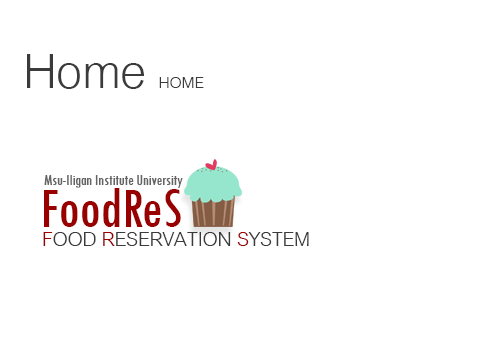
<style>
.page{position:relative;width:504px;height:360px;background:#ffffff}
.page>*{position:absolute;margin:0}
.t1{font:72px "CordiaNew";letter-spacing:-0.01em;color:#3b3b3b}
.t2{font:24px "CordiaNew";letter-spacing:-0.01em;color:#3b3b3b}
.t3{font:16px "TwCenMT-Condensed";letter-spacing:-0.01em;color:#646464}
.t4{font:60px "TwCenMT-Condensed";letter-spacing:-0.01em;color:#990000}
.t5{font:30px "CordiaNew";letter-spacing:-0.01em;color:#3b3b3b;text-transform:uppercase}
.t6{font:30px "CordiaNew";letter-spacing:-0.01em;color:#990000;text-transform:uppercase}
</style>
<div class="page">
<p class="t1" style="left:27px;top:54px;width:177px;height:35px">Home <span class="t2">HOME</span></p>
<p class="t3" style="left:44px;top:175px;width:139px;height:13px">Msu-Iligan Institute University</p>
<p class="t4" style="left:44px;top:188px;width:137px;height:39px">FoodReS</p>
<p class="t5" style="left:43px;top:232px;width:266px;height:14px"><span class="t6">F</span>ood <span class="t6">R</span>eservation <span class="t6">S</span>ystem</p>
</div>
